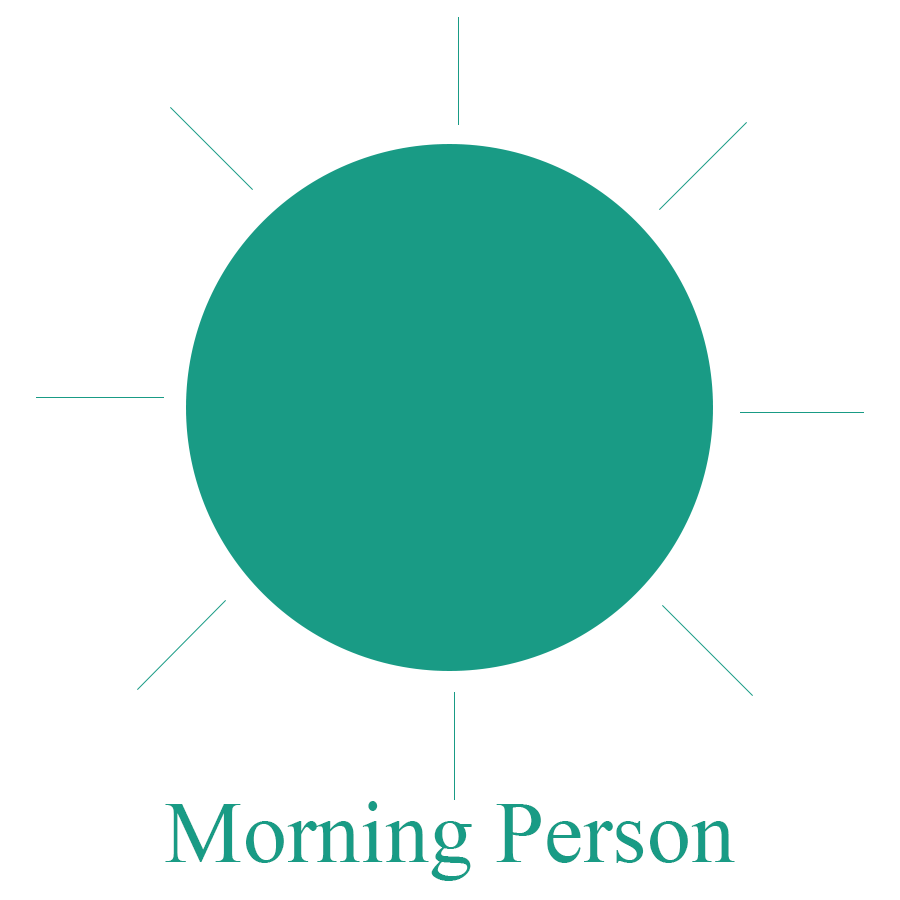
<style>
.page{position:relative;width:900px;height:900px;background:#ffffff}
.page>*{position:absolute;margin:0}
.t1{font:88.2px "TimesNewRomanPSMT";color:#199b85}
</style>
<div class="page">
<p class="t1" style="left:165px;top:801px;width:570px;height:80px">Morning Person</p>
</div>
